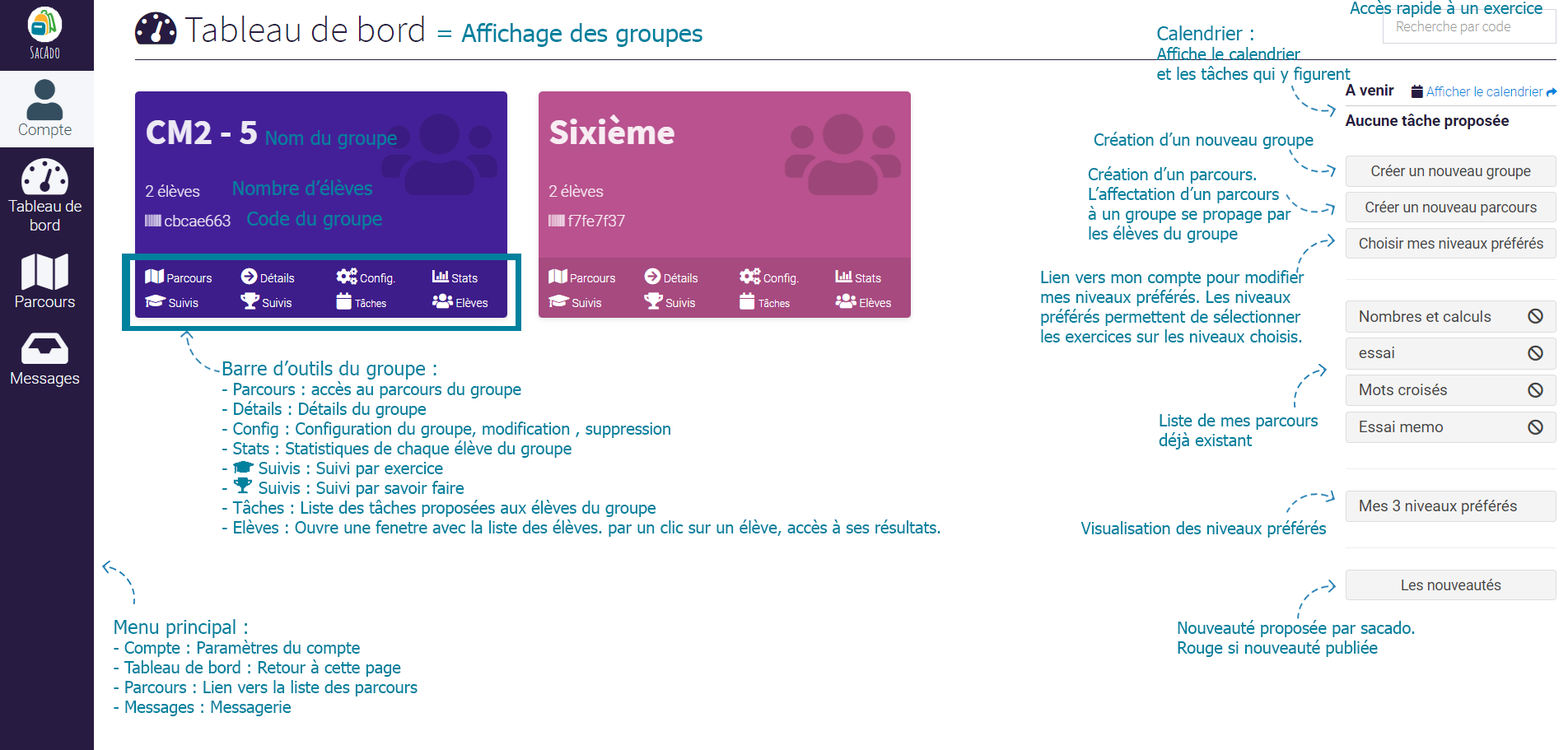
<style>
.page{position:relative;width:1568px;height:750px;background:#ffffff}
.page>*{position:absolute;margin:0}
.t1{font:16.5px "Tahoma";color:#00819e}
.t2{font:24.7px "Tahoma";color:#00819e}
.t3{font:19.2px "Tahoma";color:#00819e}
.t4{font:9.9px "Tahoma";color:#00819e}
</style>
<div class="page">
<p class="t1" style="left:1350px;top:0px;width:192px;height:17px">Accès rapide à un exercice</p>
<p class="t2" style="left:437px;top:23px;width:265px;height:24px">= Affichage des groupes</p>
<p class="t1" style="left:1156px;top:26px;width:195px;height:57px"><span class="t3">Calendrier :<br></span>Affiche le calendrier <br>et les tâches qui y figurent</p>
<p class="t3" style="left:266px;top:130px;width:131px;height:19px">Nom du groupe</p>
<p class="t4" style="left:1094px;top:132px;width:220px;height:17px">Création d’un nouveau groupe</p>
<p class="t1" style="left:1088px;top:166px;width:203px;height:77px">Création d’un parcours. <br>L’affectation d’un parcours <br>à un groupe se propage par <br>les élèves du groupe</p>
<p class="t3" style="left:233px;top:180px;width:139px;height:15px">Nombre d’élèves</p>
<p class="t3" style="left:247px;top:211px;width:135px;height:19px">Code du groupe</p>
<p class="t4" style="left:1041px;top:270px;width:263px;height:73px">Lien vers mon compte pour modifier <br>mes niveaux préférés. Les niveaux <br>préférés permettent de sélectionner <br>les exercices sur les niveaux choisis.</p>
<p class="t1" style="left:222px;top:361px;width:718px;height:176px"><span class="t3">Barre d’outils du groupe :<br></span>- Parcours : accès au parcours du groupe<br>- Détails : Détails du groupe<br>- Config : Configuration du groupe, modification , suppression<br>- Stats : Statistiques de chaque élève du groupe<br>-      Suivis : Suivi par exercice<br>-      Suivis : Suivi par savoir faire<br>- Tâches : Liste des tâches proposées aux élèves du groupe<br>- Elèves : Ouvre une fenetre avec la liste des élèves. par un clic sur un élève, accès à ses résultats.</p>
<p class="t4" style="left:1159px;top:413px;width:159px;height:37px">Liste de mes parcours <br>déjà existant</p>
<p class="t4" style="left:1080px;top:520px;width:247px;height:18px">Visualisation des niveaux préférés</p>
<p class="t4" style="left:114px;top:619px;width:304px;height:97px"><span class="t3">Menu principal :<br></span>- Compte : Paramètres du compte<br>- Tableau de bord : Retour à cette page<br>- Parcours : Lien vers la liste des parcours<br>- Messages : Messagerie</p>
<p class="t4" style="left:1178px;top:620px;width:237px;height:37px">Nouveauté proposée par sacado. <br>Rouge si nouveauté publiée</p>
</div>
